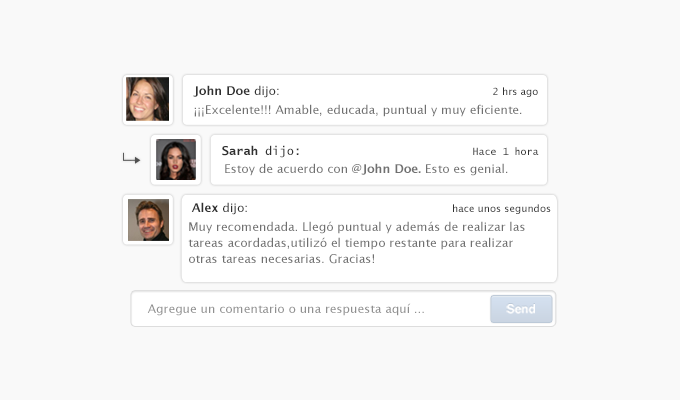
<style>
.page{position:relative;width:680px;height:400px;background:#f9f9f9}
.page>*{position:absolute;margin:0}
.t1{font:10px "LucidaSans";color:#303030}
.t2{font:12px "LucidaSans-Demi";color:#303030}
.t3{font:12px "LucidaSans";color:#303030}
.t4{font:12px "LucidaSans";color:#707070}
.t5{font:10px "LucidaSans-Typewriter";color:#303030}
.t6{font:12px "LucidaSans-TypewriterBold";color:#303030}
.t7{font:12px "LucidaSans-Typewriter";color:#303030}
.t8{font:12px "LucidaSans-Demi";color:#707070}
.t9{font:12px/16px "LucidaSans";color:#707070}
.t10{font:12px "LucidaSans";color:#909090}
.t11{font:12px "Helvetica-Bold";color:#ffffff}
</style>
<div class="page">
<p class="t1" style="left:193px;top:85px;width:345px;height:13px"><span class="t2">John Doe</span><span class="t3"> dijo:                                                        </span>2 hrs ago</p>
<p class="t4" style="left:194px;top:104px;width:328px;height:13px">¡¡¡Excelente!!! Amable, educada, puntual y muy eficiente.</p>
<p class="t5" style="left:222px;top:145px;width:317px;height:13px"><span class="t6">Sarah </span><span class="t7">dijo:                       </span>Hace 1 hora</p>
<p class="t4" style="left:225px;top:163px;width:283px;height:13px">Estoy de acuerdo con <span class="t8">@John Doe.</span> Esto es genial.</p>
<p class="t1" style="left:191px;top:202px;width:360px;height:13px"><span class="t2">Alex </span><span class="t3">dijo:                                                     </span>hace unos segundos</p>
<p class="t9" style="left:188px;top:221px;width:337px;height:43px">Muy recomendada. Llegó puntual y además de realizar las <br>tareas acordadas,utilizó el tiempo restante para realizar<br>otras tareas necesarias. Gracias!</p>
<p class="t10" style="left:147px;top:303px;width:277px;height:13px">Agregue un comentario o una respuesta aquí ...</p>
<p class="t11" style="left:506px;top:304px;width:29px;height:10px">Send</p>
</div>
